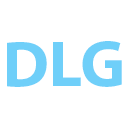
<style>
.page{position:relative;width:128px;height:128px;background:#ffffff}
.page>*{position:absolute;margin:0}
.t1{font:66px "MyriadPro-Bold";color:#6fcff9}
</style>
<div class="page">
<p class="t1" style="left:7px;top:41px;width:115px;height:46px">DLG</p>
</div>
